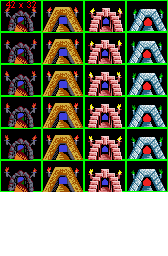
<style>
.page{position:relative;width:168px;height:256px;background:#000000}
.page>*{position:absolute;margin:0}
.t1{font:9px "ArialMT";color:#ff0000}
</style>
<div class="page">
<p class="t1" style="left:6px;top:1px;width:30px;height:7px">42 x 32</p>
</div>
